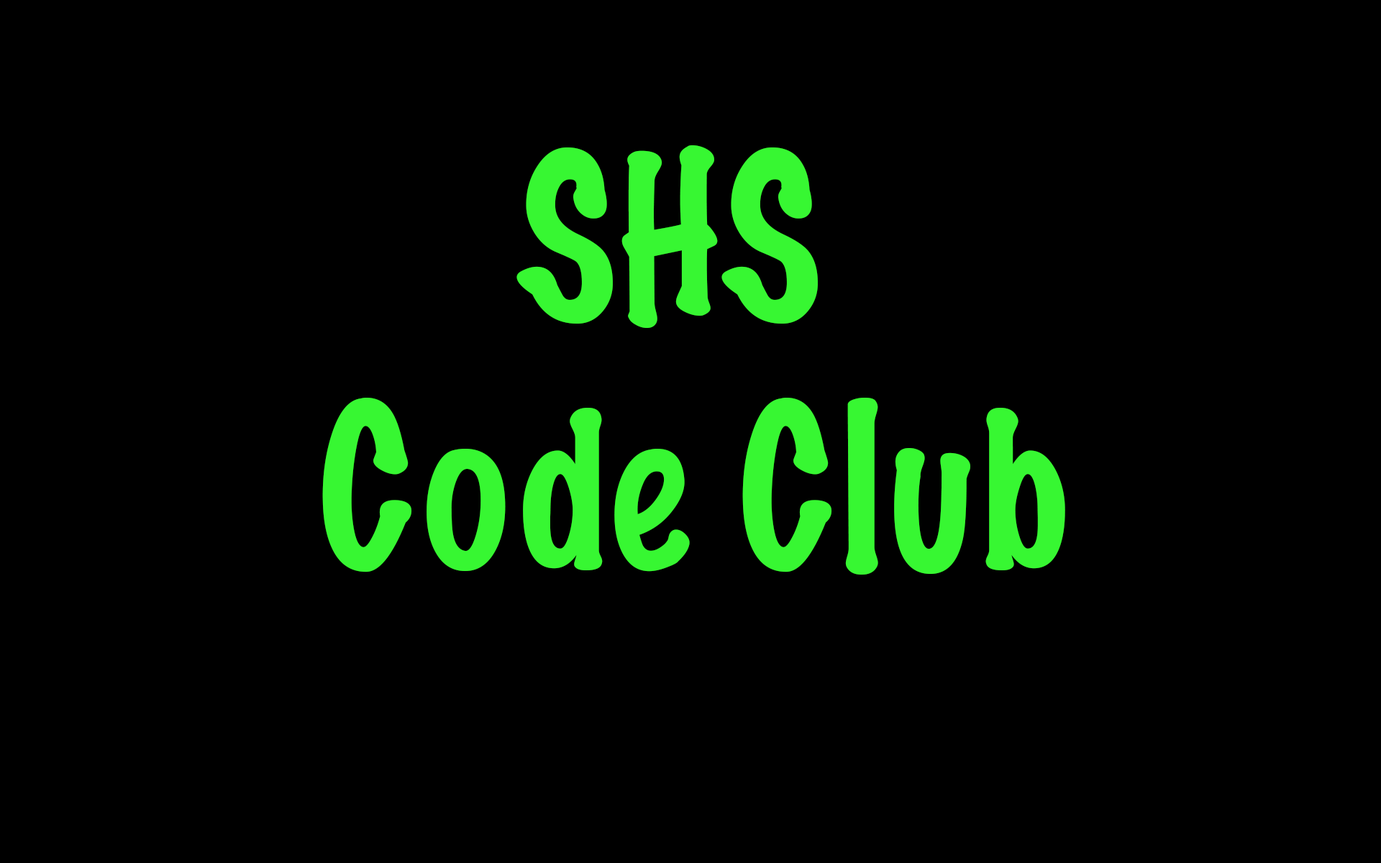
<style>
.page{position:relative;width:1381px;height:863px;background:#000000}
.page>*{position:absolute;margin:0}
.t1{font:207.2px "MarkerFelt-Thin";color:#37f732}
</style>
<div class="page">
<p class="t1" style="left:322px;top:145px;width:743px;height:430px;text-align:center">SHS <br>Code Club</p>
</div>
